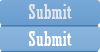
<style>
.page{position:relative;width:100px;height:52px}
.page>*{position:absolute;margin:0}
.t1{font:20px "Rockwell-Condensed";color:#e1e5e9}
.t2{font:20px "Rockwell-Condensed";color:#ffffff}
</style>
<div class="page">
<p class="t1" style="left:28px;top:4px;width:44px;height:15px">Submit</p>
<p class="t2" style="left:28px;top:31px;width:44px;height:15px">Submit</p>
</div>
